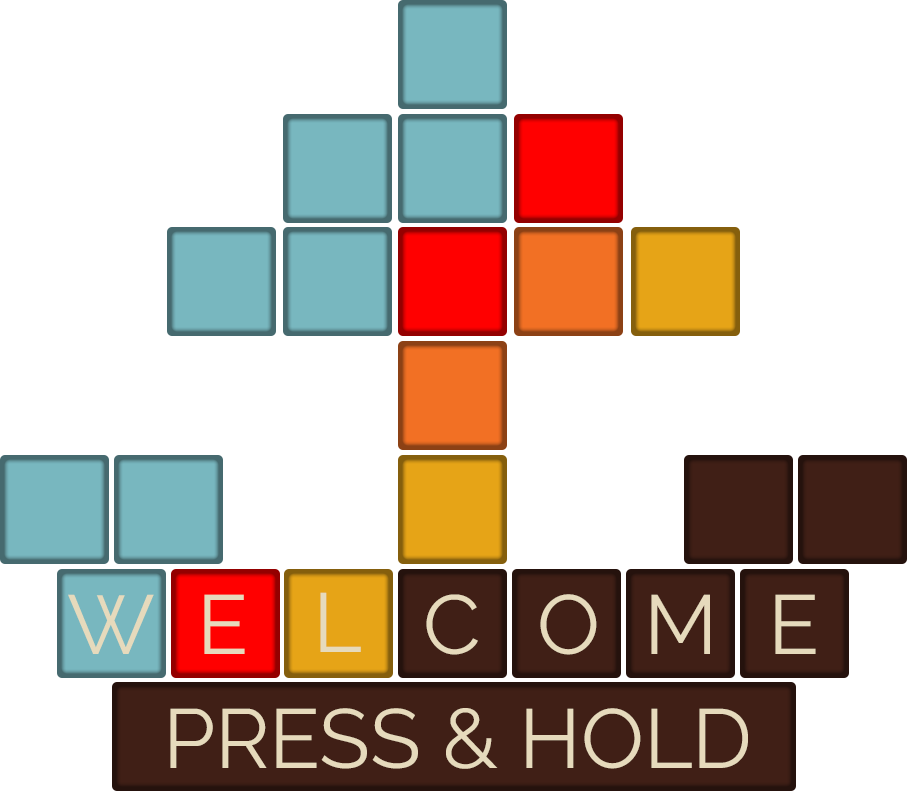
<style>
.page{position:relative;width:907px;height:791px;background:#ffffff}
.page>*{position:absolute;margin:0}
.t1{font:83.6px "Raleway-Regular";color:#e6dabc}
.t2{font:20.1px "Raleway-Regular";color:#e6dabc}
</style>
<div class="page">
<p class="t1" style="left:320px;top:592px;width:41px;height:60px">L</p>
<p class="t1" style="left:68px;top:594px;width:86px;height:60px">W</p>
<p class="t1" style="left:204px;top:594px;width:41px;height:60px">E</p>
<p class="t1" style="left:426px;top:594px;width:52px;height:61px">C</p>
<p class="t1" style="left:540px;top:594px;width:57px;height:61px">O</p>
<p class="t1" style="left:651px;top:594px;width:59px;height:60px">M</p>
<p class="t1" style="left:775px;top:594px;width:41px;height:60px">E</p>
<p class="t2" style="left:170px;top:708px;width:578px;height:61px">PRESS &amp; HOLD</p>
</div>
